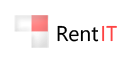
<style>
.page{position:relative;width:117px;height:63px;background:#ffffff}
.page>*{position:absolute;margin:0}
.t1{font:21.2px "YuGothicUI-Regular";color:#000000}
.t2{font:21.2px "YuGothicUI-Regular";color:#fe4343}
</style>
<div class="page">
<p class="t1" style="left:57px;top:25px;width:42px;height:17px">Rent</p>
<p class="t2" style="left:102px;top:25px;width:15px;height:17px">IT</p>
</div>
